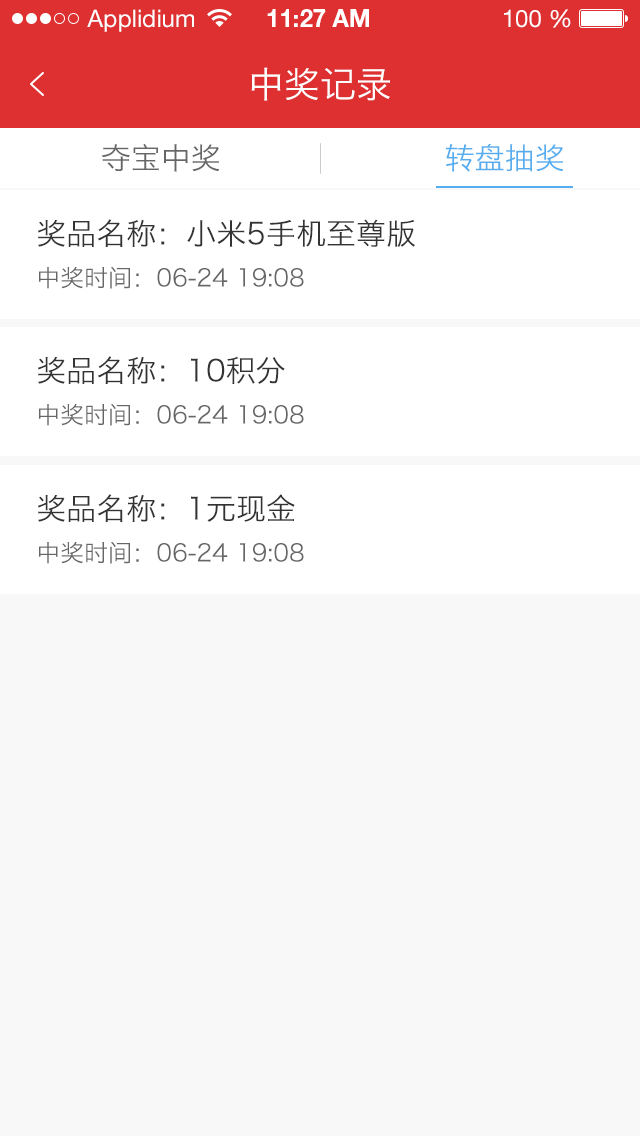
<style>
.page{position:relative;width:640px;height:1136px;background:#f8f8f8}
.page>*{position:absolute;margin:0}
.t1{font:24px "HelveticaNeueLTStd-Roman";color:#ffffff}
.t2{font:24px "HelveticaNeueLTStd-Bd";color:#ffffff}
.t3{font:36px "HiraginoSansGB-W3";color:#ffffff}
.t4{font:30px "HiraginoSansGB-W3";color:#666666}
.t5{font:30px "HiraginoSansGB-W3";color:#55acef}
.t6{font:30px "HiraginoSansGB-W3";color:#333333}
.t7{font:24px "HiraginoSansGB-W3";color:#666666}
</style>
<div class="page">
<p class="t1" style="left:87px;top:9px;width:107px;height:23px">Applidium</p>
<p class="t2" style="left:267px;top:9px;width:102px;height:18px">11:27 AM</p>
<p class="t1" style="left:504px;top:9px;width:67px;height:19px">100 %</p>
<p class="t3" style="left:251px;top:67px;width:139px;height:34px">中奖记录</p>
<p class="t4" style="left:101px;top:144px;width:119px;height:28px">夺宝中奖</p>
<p class="t5" style="left:446px;top:144px;width:118px;height:28px">转盘抽奖</p>
<p class="t6" style="left:38px;top:219px;width:377px;height:29px">奖品名称：小米5手机至尊版</p>
<p class="t7" style="left:38px;top:266px;width:266px;height:23px">中奖时间：06-24 19:08</p>
<p class="t6" style="left:38px;top:356px;width:247px;height:29px">奖品名称：10积分</p>
<p class="t7" style="left:38px;top:403px;width:266px;height:23px">中奖时间：06-24 19:08</p>
<p class="t6" style="left:38px;top:494px;width:257px;height:29px">奖品名称：1元现金</p>
<p class="t7" style="left:38px;top:541px;width:266px;height:23px">中奖时间：06-24 19:08</p>
</div>
